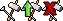
<style>
.page{position:relative;width:63px;height:21px;background:#ffffff}
.page>*{position:absolute;margin:0}
.t1{font:19.8px "Bauhaus93";color:#c90000;scale:1.22 1}
</style>
<div class="page">
<p class="t1" style="left:43px;top:2px;width:14px;height:13px">X</p>
</div>
